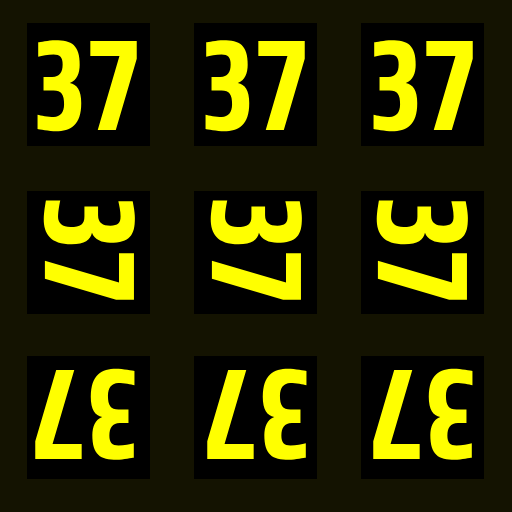
<style>
.page{position:relative;width:512px;height:512px;background:#141301}
.page>*{position:absolute;margin:0}
.t1{font:130px "Share-BoldOSF";color:#ffff00}
</style>
<div class="page">
<p class="t1" style="left:37px;top:40px;width:100px;height:92px">37</p>
<p class="t1" style="left:205px;top:40px;width:100px;height:92px">37</p>
<p class="t1" style="left:373px;top:40px;width:100px;height:92px">37</p>
<p class="t1" style="left:43px;top:200px;width:92px;height:100px;rotate:90deg">37</p>
<p class="t1" style="left:210px;top:200px;width:92px;height:100px;rotate:90deg">37</p>
<p class="t1" style="left:376px;top:200px;width:92px;height:100px;rotate:90deg">37</p>
<p class="t1" style="left:35px;top:368px;width:100px;height:92px;rotate:-180deg">37</p>
<p class="t1" style="left:207px;top:368px;width:100px;height:92px;rotate:-180deg">37</p>
<p class="t1" style="left:373px;top:368px;width:100px;height:92px;rotate:-180deg">37</p>
</div>
